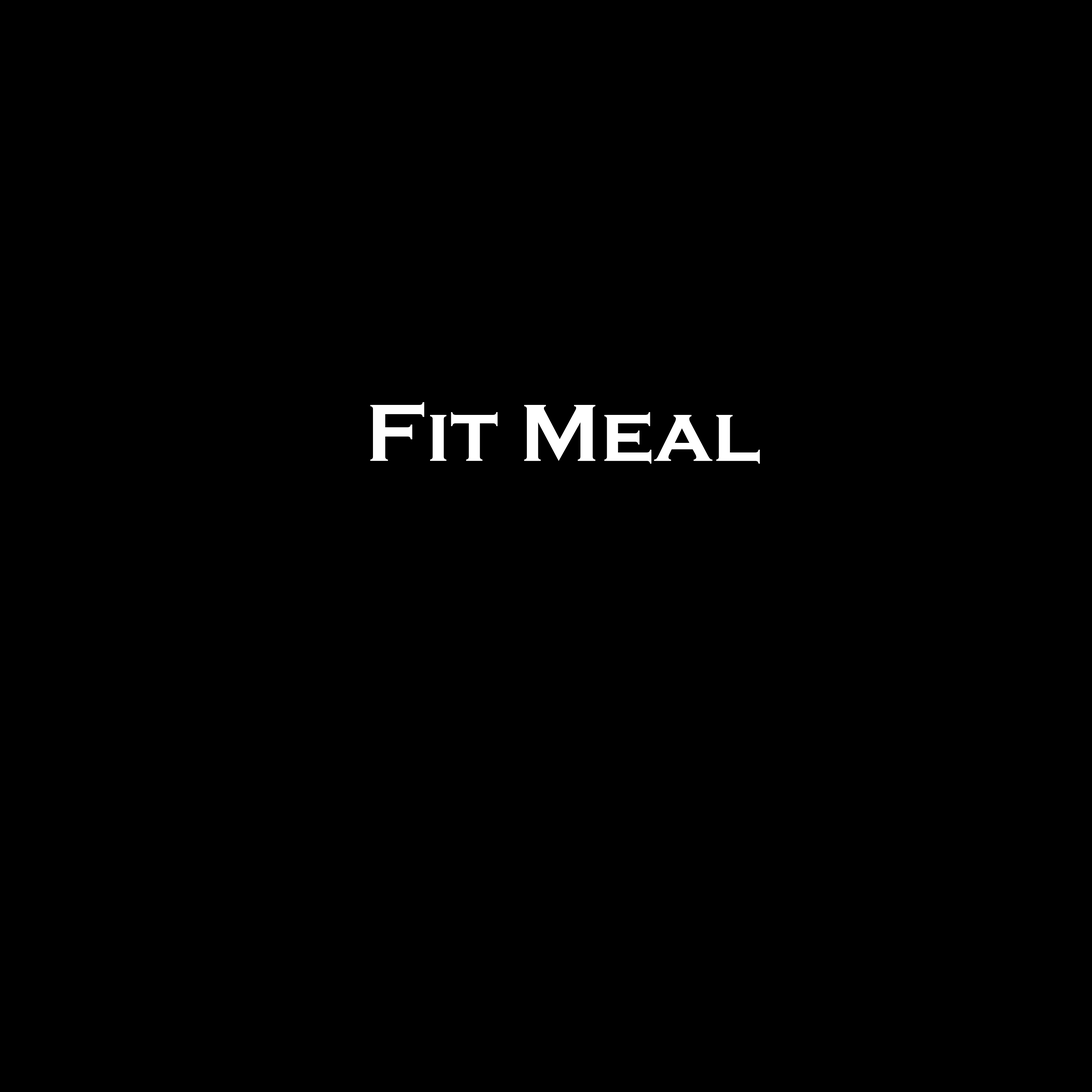
<style>
.page{position:relative;width:1092px;height:1092px;background:#000000}
.page>*{position:absolute;margin:0}
.t1{font:83.8px "CopperplateGothic-Bold";color:#ffffff}
</style>
<div class="page">
<p class="t1" style="left:370px;top:402px;width:390px;height:62px">Fit Meal</p>
</div>
